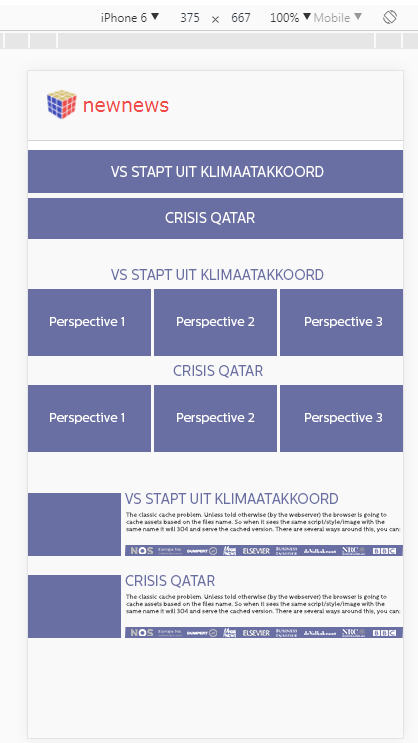
<style>
.page{position:relative;width:418px;height:743px;background:#f9f9f9}
.page>*{position:absolute;margin:0}
.t1{font:15px "CentraleSans-Regular";color:#ffffff;scale:0.9 1}
.t2{font:15px "CentraleSans-Regular";color:#696ea3;scale:0.9 1}
.t3{font:11.8px "CentraleSans-Regular";color:#ffffff;scale:1.05 1}
.t4{font:14.9px "CentraleSans-Regular";color:#696ea3;scale:0.92 1}
.t5{font:6px "CentraleSans-Regular";color:#404040}
.t6{font:6px "CentraleSans-Regular";color:#696ea3}
</style>
<div class="page">
<p class="t1" style="left:111px;top:166px;width:213px;height:11px">VS STAPT UIT KLIMAATAKKOORD</p>
<p class="t1" style="left:165px;top:212px;width:90px;height:13px">CRISIS QATAR</p>
<p class="t2" style="left:111px;top:269px;width:213px;height:11px">VS STAPT UIT KLIMAATAKKOORD</p>
<p class="t3" style="left:50px;top:316px;width:74px;height:12px">Perspective 1</p>
<p class="t3" style="left:177px;top:316px;width:78px;height:12px">Perspective 2</p>
<p class="t3" style="left:305px;top:316px;width:77px;height:12px">Perspective 3</p>
<p class="t4" style="left:173px;top:365px;width:90px;height:13px">CRISIS QATAR</p>
<p class="t3" style="left:50px;top:412px;width:74px;height:12px">Perspective 1</p>
<p class="t3" style="left:177px;top:412px;width:78px;height:12px">Perspective 2</p>
<p class="t3" style="left:305px;top:412px;width:77px;height:12px">Perspective 3</p>
<p class="t4" style="left:125px;top:493px;width:213px;height:11px">VS STAPT UIT KLIMAATAKKOORD</p>
<p class="t5" style="left:126px;top:512px;width:275px;height:21px">The classic cache problem. Unless told otherwise (by the webserver) the browser is going to cache assets based on the files name. So when it sees the same script/style/image with the same name it will 304 and serve the cached version. There are several ways around this, you can:<br><span class="t6"><br>Configure the webserver to tell browsers not to cache the file. This is obviously inefficient as the user will have to download the same file time and time again.</span></p>
<p class="t4" style="left:125px;top:575px;width:90px;height:13px">CRISIS QATAR</p>
<p class="t5" style="left:126px;top:594px;width:275px;height:21px">The classic cache problem. Unless told otherwise (by the webserver) the browser is going to cache assets based on the files name. So when it sees the same script/style/image with the same name it will 304 and serve the cached version. There are several ways around this, you can:<br><span class="t6"><br>Configure the webserver to tell browsers not to cache the file. This is obviously inefficient as the user will have to download the same file time and time again.</span></p>
</div>
